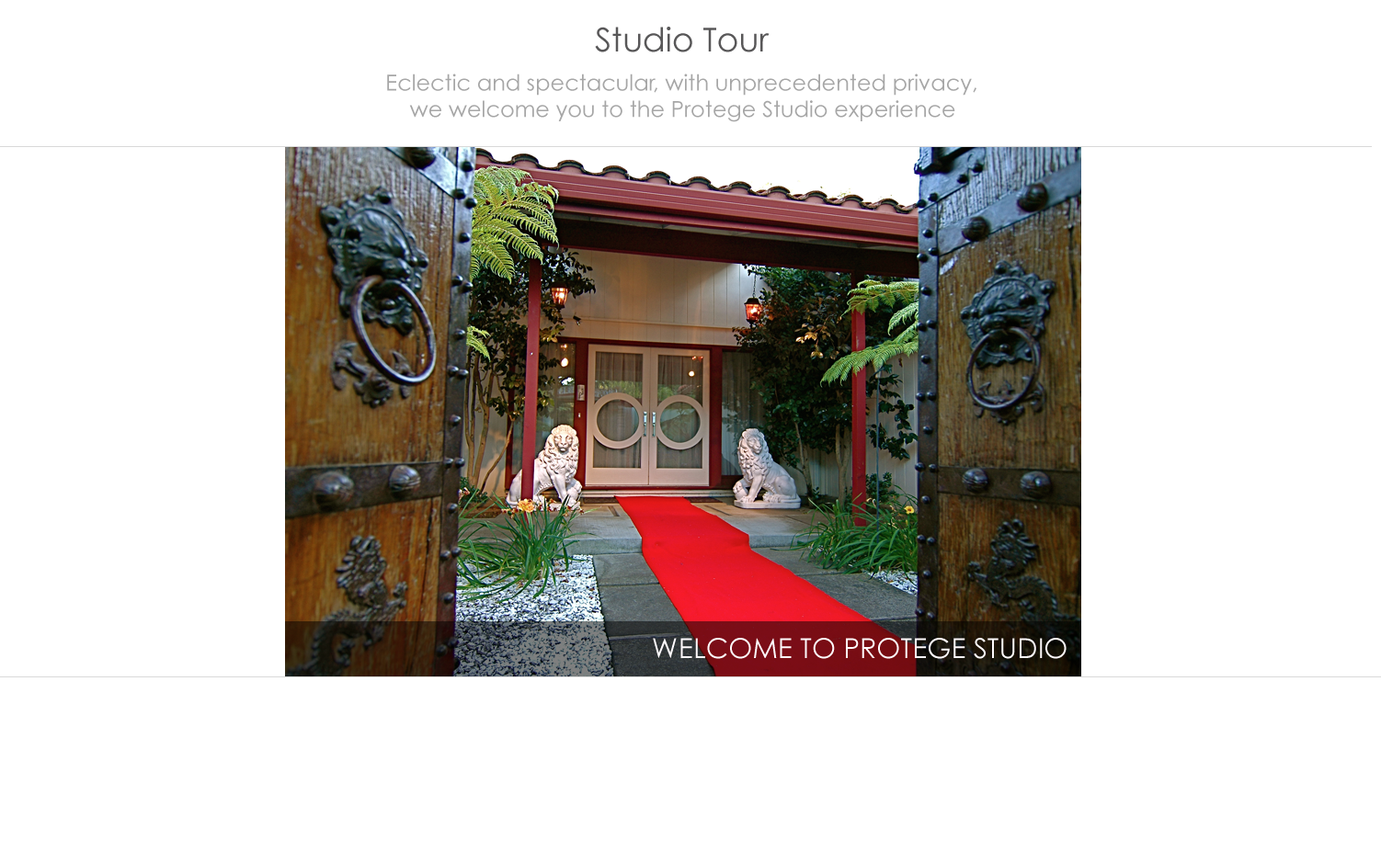
<style>
.page{position:relative;width:1381px;height:863px;background:#ffffff}
.page>*{position:absolute;margin:0}
.t1{font:33.1px "CenturyGothic";color:#585758}
.t2{font:22.1px "CenturyGothic";color:#a6a6a6}
</style>
<div class="page">
<p class="t1" style="left:595px;top:27px;width:175px;height:25px">Studio Tour</p>
<p class="t2" style="left:387px;top:74px;width:590px;height:48px">Eclectic and spectacular, with unprecedented privacy,<br>    we welcome you to the Protege Studio experience</p>
</div>
